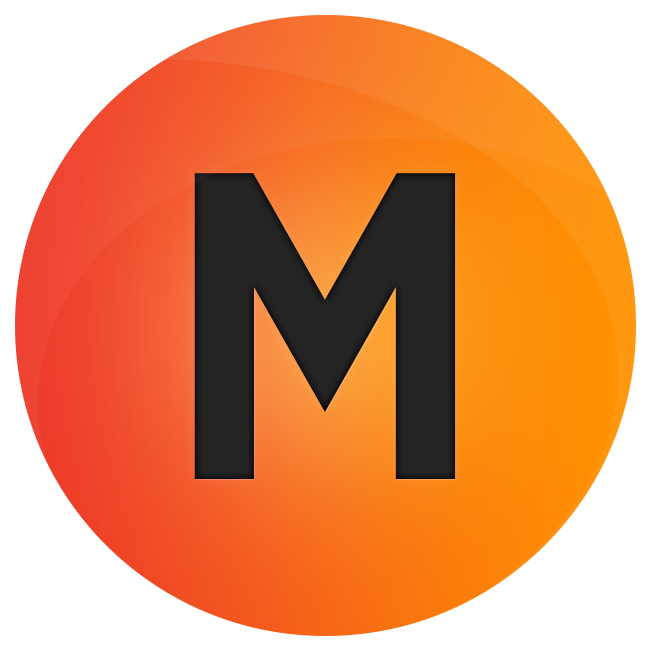
<style>
.page{position:relative;width:651px;height:651px;background:#ffffff}
.page>*{position:absolute;margin:0}
.t1{font:391.8px "DeansgateCondensed-Bold";color:#242424}
</style>
<div class="page">
<p class="t1" style="left:194px;top:173px;width:262px;height:306px">M</p>
</div>
